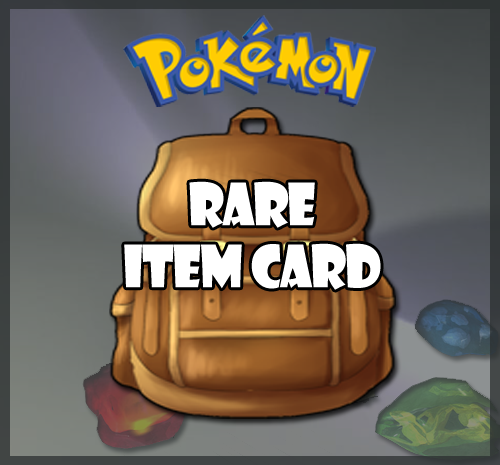
<style>
.page{position:relative;width:500px;height:465px}
.page>*{position:absolute;margin:0}
.t1{font:56.9px "ShowcardGothic-Reg";letter-spacing:-0.025em;color:#ffffff;scale:0.91 1}
</style>
<div class="page">
<p class="t1" style="left:124px;top:181px;width:257px;height:109px;text-align:center">Rare<br>Item Card</p>
</div>
